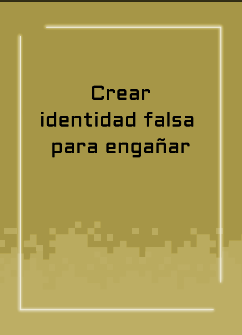
<style>
.page{position:relative;width:242px;height:335px;background:#a69647}
.page>*{position:absolute;margin:0}
.t1{font:20px/26.7px "Aldrich-Regular";letter-spacing:0.015em;color:#000000}
</style>
<div class="page">
<p class="t1" style="left:41px;top:85px;width:153px;height:73px;text-align:center">Crear<br>identidad falsa <br>para engañar</p>
</div>
